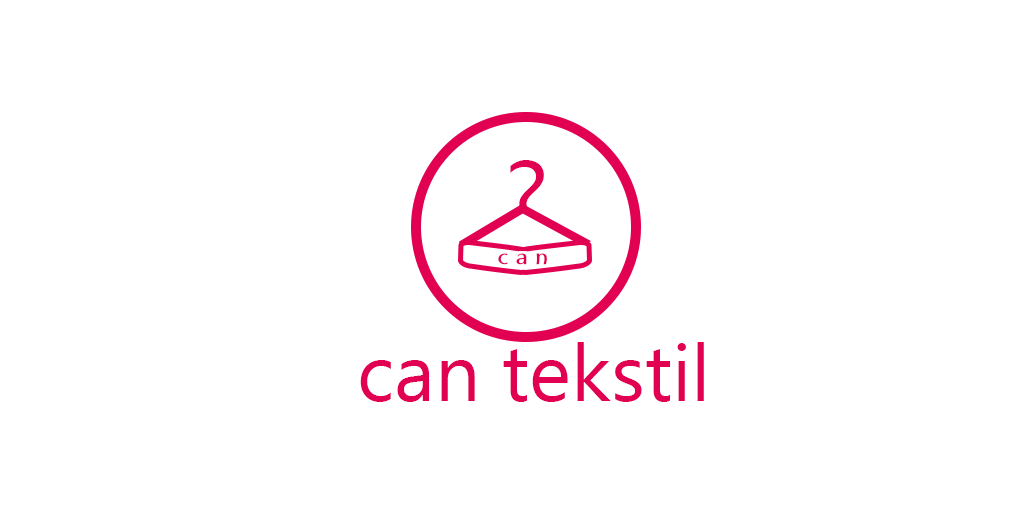
<style>
.page{position:relative;width:1024px;height:512px;background:#ffffff}
.page>*{position:absolute;margin:0}
.t1{font:100px "Ebrima";color:#e10052}
.t2{font:20px "Ebrima";color:#e10052}
.t3{font:80px "Ebrima";color:#e10052}
</style>
<div class="page">
<p class="t1" style="left:510px;top:160px;width:34px;height:72px">?</p>
<p class="t2" style="left:498px;top:253px;width:49px;height:12px">c a n</p>
<p class="t3" style="left:360px;top:342px;width:344px;height:60px">can tekstil</p>
</div>
